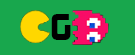
<style>
.page{position:relative;width:135px;height:55px;background:#18a74d}
.page>*{position:absolute;margin:0}
.t1{font:37.5px "ContinuumBold";color:#000000}
</style>
<div class="page">
<p class="t1" style="left:51px;top:14px;width:20px;height:26px">G</p>
</div>
